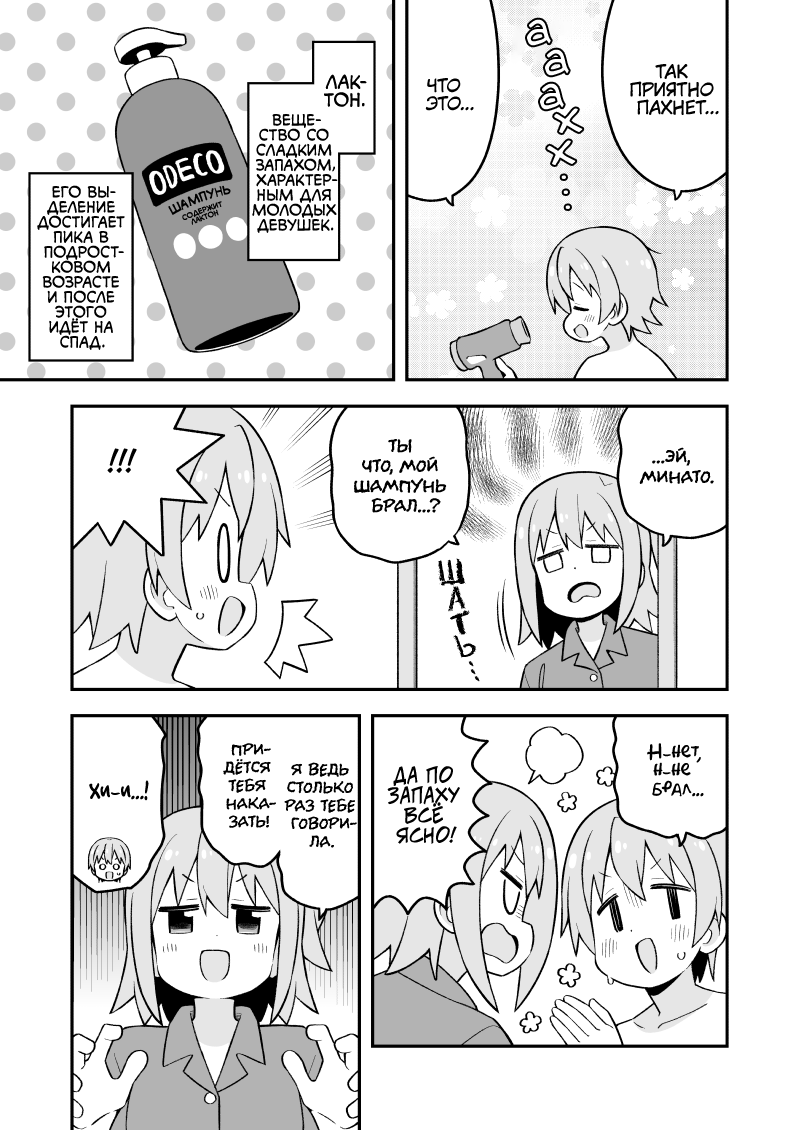
<style>
.page{position:relative;width:800px;height:1130px;background:#ffffff}
.page>*{position:absolute;margin:0}
.t1{font:48px "v_Augie";color:#ffffff}
.t2{font:18px "KuraiVoice2";color:#000000;text-transform:uppercase}
.t3{font:18px "v_CCMonologous";color:#000000;text-transform:uppercase}
.t4{font:15px "v_CCMonologous";color:#000000;text-transform:uppercase}
.t5{font:12px "v_CCMonologous";color:#000000;text-transform:uppercase}
.t6{font:36px "v_Augie";color:#ffffff}
.t7{font:7px "v_CCMonologous";color:#000000;text-transform:uppercase}
.t8{font:30px "v_CCJeffCampbell";color:#000000;text-transform:uppercase}
.t9{font:20px "el_CCEvilSchemes";color:#000000}
.t10{font:30px "DSEraserCyr";color:#000000}
.t11{font:18px "el_CCEvilSchemes";color:#000000}
.t12{font:18px "AkbarPlain";color:#000000}
.t13{font:20px "v_CCJeffCampbell";color:#000000;text-transform:uppercase}
.t14{font:20px "AkbarPlain";color:#000000}
</style>
<div class="page">
<p class="t1" style="left:527px;top:19px;width:24px;height:27px;rotate:-6deg">а</p>
<p class="t1" style="left:545px;top:49px;width:24px;height:27px;rotate:-6deg">а</p>
<p class="t2" style="left:630px;top:64px;width:89px;height:51px;text-align:center">так<br>приятно<br>пахнет...</p>
<p class="t3" style="left:324px;top:74px;width:43px;height:33px;text-align:center">Лак-<br>тон.</p>
<p class="t2" style="left:425px;top:78px;width:49px;height:33px;text-align:center">Что<br>это...</p>
<p class="t1" style="left:540px;top:83px;width:24px;height:27px;rotate:-6deg">а</p>
<p class="t1" style="left:554px;top:108px;width:29px;height:25px;rotate:-6deg">х</p>
<p class="t4" style="left:252px;top:114px;width:86px;height:119px;text-align:center">Веще-<br>ство со<br>сладким<br>запахом,<br>характер-<br>ным для<br>молодых<br>девушек.</p>
<p class="t1" style="left:547px;top:140px;width:29px;height:25px;rotate:-6deg">х</p>
<p class="t4" style="left:37px;top:185px;width:88px;height:165px;text-align:center">Его вы-<br>деление<br>достигает<br>пика в<br>подрост-<br>ковом<br>возрасте<br>и после<br>этого<br>идёт на<br>спад.</p>
<p class="t5" style="left:168px;top:185px;width:63px;height:30px;rotate:-20deg">шампунь</p>
<p class="t6" style="left:561px;top:175px;width:5px;height:4px">.</p>
<p class="t6" style="left:563px;top:190px;width:5px;height:4px">.</p>
<p class="t7" style="left:182px;top:201px;width:40px;height:24px;text-align:center;rotate:-20deg">содержит<br>лактон</p>
<p class="t6" style="left:565px;top:205px;width:5px;height:4px">.</p>
<p class="t8" style="left:107px;top:448px;width:30px;height:25px">!!!</p>
<p class="t9" style="left:354px;top:439px;width:93px;height:74px;text-align:center">Ты<br>что, мой<br>шампунь<br>брал...?</p>
<p class="t9" style="left:639px;top:447px;width:75px;height:37px;text-align:center">...Эй,<br>Минато.</p>
<p class="t10" style="left:438px;top:558px;width:28px;height:28px;rotate:-7deg">ш</p>
<p class="t10" style="left:448px;top:586px;width:18px;height:26px;rotate:-6deg">а</p>
<p class="t10" style="left:450px;top:610px;width:20px;height:25px;rotate:-13deg">т</p>
<p class="t10" style="left:453px;top:635px;width:24px;height:23px;rotate:-18deg">ь</p>
<p class="t10" style="left:468px;top:661px;width:6px;height:6px">.</p>
<p class="t10" style="left:470px;top:669px;width:6px;height:6px">.</p>
<p class="t10" style="left:474px;top:676px;width:6px;height:6px">.</p>
<p class="t11" style="left:223px;top:743px;width:53px;height:85px;text-align:center">При-<br>дётся<br>тебя<br>нака-<br>зать!</p>
<p class="t12" style="left:647px;top:743px;width:57px;height:54px;text-align:center">Н-нет,<br>н-не<br>брал...</p>
<p class="t11" style="left:284px;top:762px;width:73px;height:86px;text-align:center">Я ведь<br>столько<br>раз тебе<br>говори-<br>ла.</p>
<p class="t13" style="left:387px;top:766px;width:73px;height:78px;text-align:center">Да по<br>запаху<br>всё<br>ясно!</p>
<p class="t14" style="left:89px;top:780px;width:60px;height:21px">Хи-и...!</p>
</div>
